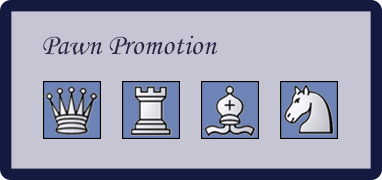
<style>
.page{position:relative;width:382px;height:180px;background:#c6c5d3}
.page>*{position:absolute;margin:0}
.t1{font:29.2px "MonotypeCorsiva";color:#282846}
</style>
<div class="page">
<p class="t1" style="left:43px;top:35px;width:175px;height:20px">Pawn Promotion</p>
</div>
